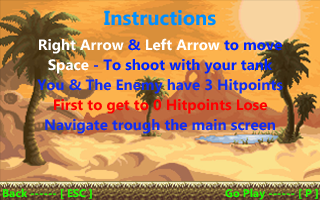
<style>
.page{position:relative;width:320px;height:200px}
.page>*{position:absolute;margin:0}
.t1{font:20.6px "MicrosoftPhagsPa-Bold";color:#0090ff}
.t2{font:15px "MicrosoftPhagsPa-Bold";color:#ffffff}
.t3{font:15px "MicrosoftPhagsPa-Bold";color:#0024ff}
.t4{font:15px "MicrosoftPhagsPa-Bold";color:#112df2}
.t5{font:15px "MicrosoftPhagsPa-Bold";color:#ff0000}
.t6{font:11px "MicrosoftPhagsPa-Bold";color:#1eff00}
</style>
<div class="page">
<p class="t1" style="left:104px;top:10px;width:112px;height:16px">Instructions</p>
<p class="t2" style="left:39px;top:38px;width:243px;height:16px">Right Arrow <span class="t3">&amp; </span>Left Arrow <span class="t3">to move</span></p>
<p class="t3" style="left:48px;top:59px;width:225px;height:15px"><span class="t2">Space </span>- To shoot with your tank</p>
<p class="t4" style="left:37px;top:79px;width:246px;height:15px">You &amp; The Enemy have 3 Hitpoints</p>
<p class="t5" style="left:54px;top:99px;width:213px;height:15px">First to get to 0 Hitpoints Lose</p>
<p class="t4" style="left:45px;top:119px;width:230px;height:15px">Navigate trough the main screen</p>
<p class="t6" style="left:2px;top:188px;width:90px;height:11px">Back ------ [ ESC ]</p>
<p class="t6" style="left:225px;top:188px;width:93px;height:12px">Go Play ------ [ P ]</p>
</div>
